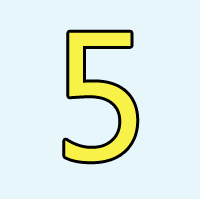
<style>
.page{position:relative;width:200px;height:200px;background:#e7f6fa}
.page>*{position:absolute;margin:0}
.t1{font:180px "MicrosoftPhagsPa";color:#f8f248}
</style>
<div class="page">
<p class="t1" style="left:65px;top:32px;width:72px;height:130px">5</p>
</div>
